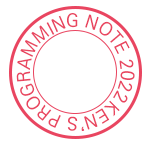
<style>
.page{position:relative;width:150px;height:150px;background:#ffffff}
.page>*{position:absolute;margin:0}
.t1{font:17.8px/33.5px "KoPubWorldDotumPM";color:#e94560}
</style>
<div class="page">
<p class="t1" style="left:16px;top:13px;width:119px;height:118px;text-align:center">KEN’S PROGRAMMING NOTE 2022</p>
</div>
